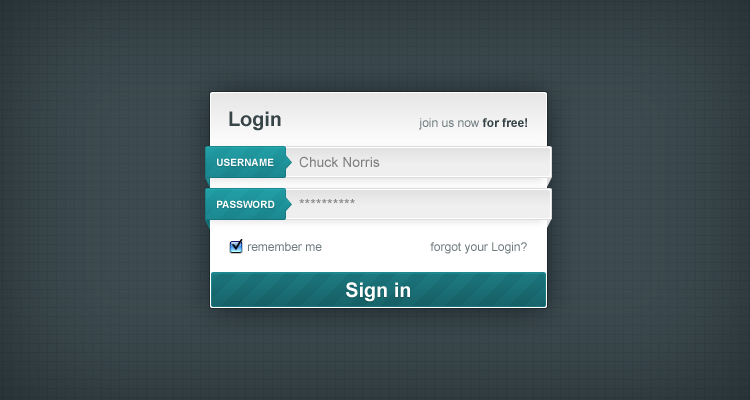
<style>
.page{position:relative;width:750px;height:400px}
.page>*{position:absolute;margin:0}
.t1{font:20px "Arial-BoldMT";color:#374448}
.t2{font:12px "ArialMT";color:#6c797d}
.t3{font:12px "Arial-BoldMT";color:#374448}
.t4{font:10px "Arial-BoldMT";color:#ffffff}
.t5{font:14px "ArialMT";color:#818181}
.t6{font:20px "Arial-BoldMT";color:#ffffff}
</style>
<div class="page">
<p class="t1" style="left:229px;top:111px;width:52px;height:20px">Login</p>
<p class="t2" style="left:419px;top:118px;width:108px;height:12px">join us now <span class="t3">for free!</span></p>
<p class="t4" style="left:217px;top:158px;width:57px;height:8px">USERNAME</p>
<p class="t5" style="left:299px;top:156px;width:81px;height:12px">Chuck Norris</p>
<p class="t4" style="left:217px;top:200px;width:58px;height:8px">PASSWORD</p>
<p class="t5" style="left:299px;top:199px;width:56px;height:5px">**********</p>
<p class="t2" style="left:248px;top:242px;width:74px;height:9px">remember me</p>
<p class="t2" style="left:430px;top:242px;width:97px;height:12px">forgot your Login?</p>
<p class="t6" style="left:346px;top:282px;width:64px;height:20px">Sign in</p>
</div>
